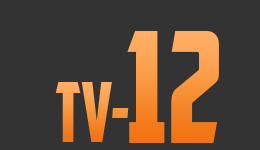
<style>
.page{position:relative;width:260px;height:150px;background:#333333}
.page>*{position:absolute;margin:0}
.t1{font:153.6px "AmericanCaptain";scale:0.93 1}
.t2{font:83.4px "AmericanCaptain";scale:0.86 1}
</style>
<div class="page">
<p class="t1" style="left:127px;top:31px;width:92px;height:112px">12</p>
<p class="t2" style="left:55px;top:82px;width:74px;height:60px">TV-</p>
</div>
